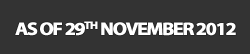
<style>
.page{position:relative;width:250px;height:54px;background:#333333}
.page>*{position:absolute;margin:0}
.t1{font:18px "MyriadPro-Bold";letter-spacing:-0.085em;color:#ffffff;font-weight:bold;scale:1.1 1}
</style>
<div class="page">
<p class="t1" style="left:15px;top:21px;width:221px;height:15px">AS OF 29TH NOVEMBER 2012</p>
</div>
